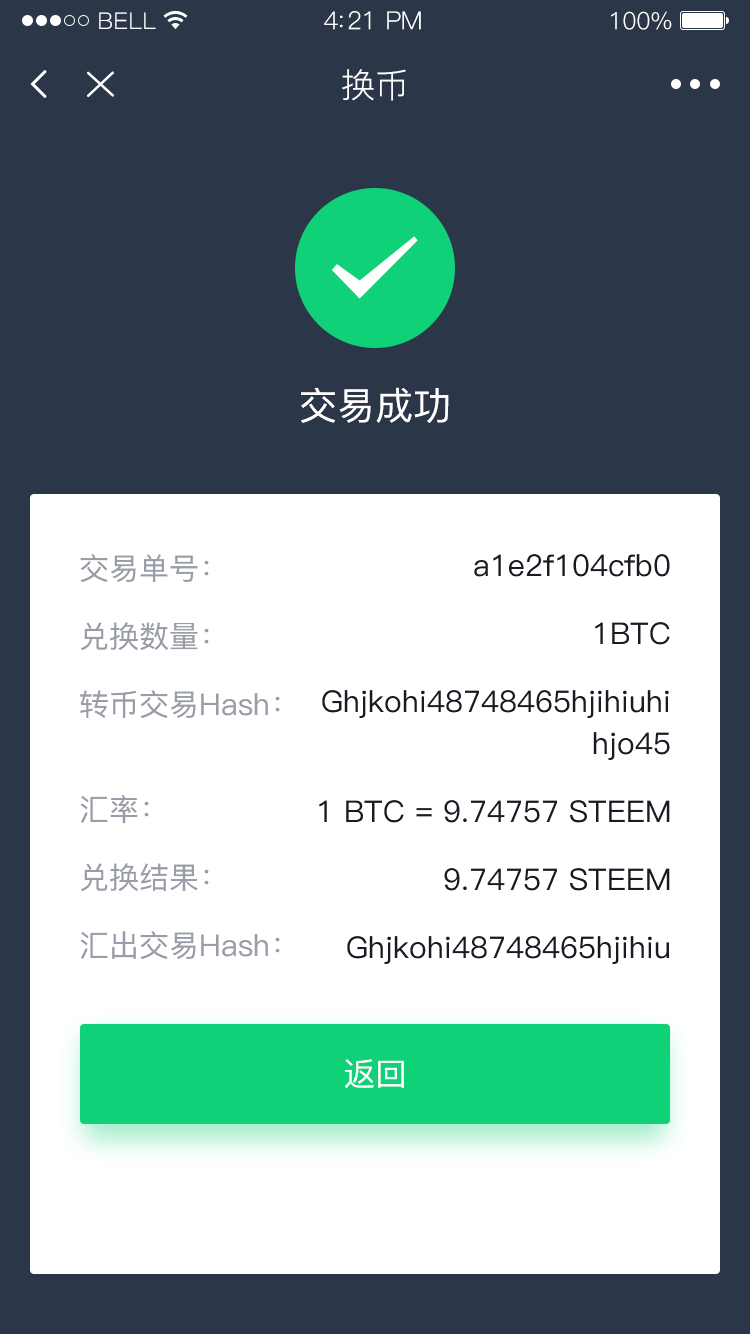
<style>
.page{position:relative;width:750px;height:1334px;background:#2b3749}
.page>*{position:absolute;margin:0}
.t1{font:23px "PingFang-SC-Regular";letter-spacing:0.02em;color:#ffffff}
.t2{font:25px "PingFang-SC-Regular";letter-spacing:-0.02em;color:#ffffff}
.t3{font:24px "PingFang-SC-Regular";letter-spacing:-0.02em;color:#ffffff}
.t4{font:34px "PingFang-SC-Regular";color:#ffffff}
.t5{font:38px "PingFang-SC-Medium";color:#ffffff}
.t6{font:30px/68px "PingFang-SC-Medium";color:#999da7}
.t7{font:30px/105px "PingFang-SC-Medium";color:#999da7}
.t8{font:30px/68px "PingFang-SC-Medium";color:#181b23}
.t9{font:30px/48px "PingFang-SC-Medium";color:#181b23}
.t10{font:30px/42px "PingFang-SC-Medium";color:#181b23}
.t11{font:32px "PingFang-SC-Medium";color:#ffffff}
</style>
<div class="page">
<p class="t1" style="left:99px;top:12px;width:57px;height:17px">BELL</p>
<p class="t2" style="left:324px;top:11px;width:97px;height:19px">4:21 PM</p>
<p class="t3" style="left:611px;top:11px;width:61px;height:19px">100%</p>
<p class="t4" style="left:342px;top:69px;width:64px;height:32px">换币</p>
<p class="t5" style="left:301px;top:387px;width:148px;height:36px">交易成功</p>
<p class="t6" style="left:80px;top:554px;width:200px;height:405px">交易单号：                        <br>兑换数量：<br>转币交易Hash：<br><span class="t7">汇</span>率：<br>兑换结果：<br>汇出交易Hash：</p>
<p class="t8" style="left:319px;top:554px;width:351px;height:410px;text-align:right"><span class="t6"> </span>a1e2f104cfb0<br>1BTC<br>G<span class="t9">hjkohi48748465hjihiuh</span><span class="t10">i<br>hjo45<br></span>1 BTC = 9.74757 STEEM<br>9.74757 STEEM<br>Ghjkohi48748465hjihiu</p>
<p class="t11" style="left:345px;top:1059px;width:59px;height:29px">返回</p>
</div>
